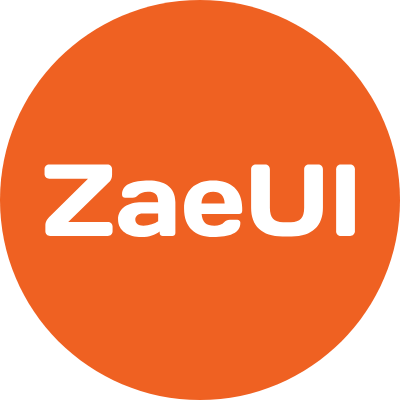
<style>
.page{position:relative;width:400px;height:400px;background:#ef6122}
.page>*{position:absolute;margin:0}
.t1{font:102px "Days";color:#ffffff}
</style>
<div class="page">
<p class="t1" style="left:44px;top:164px;width:311px;height:74px">ZaeUI</p>
</div>
